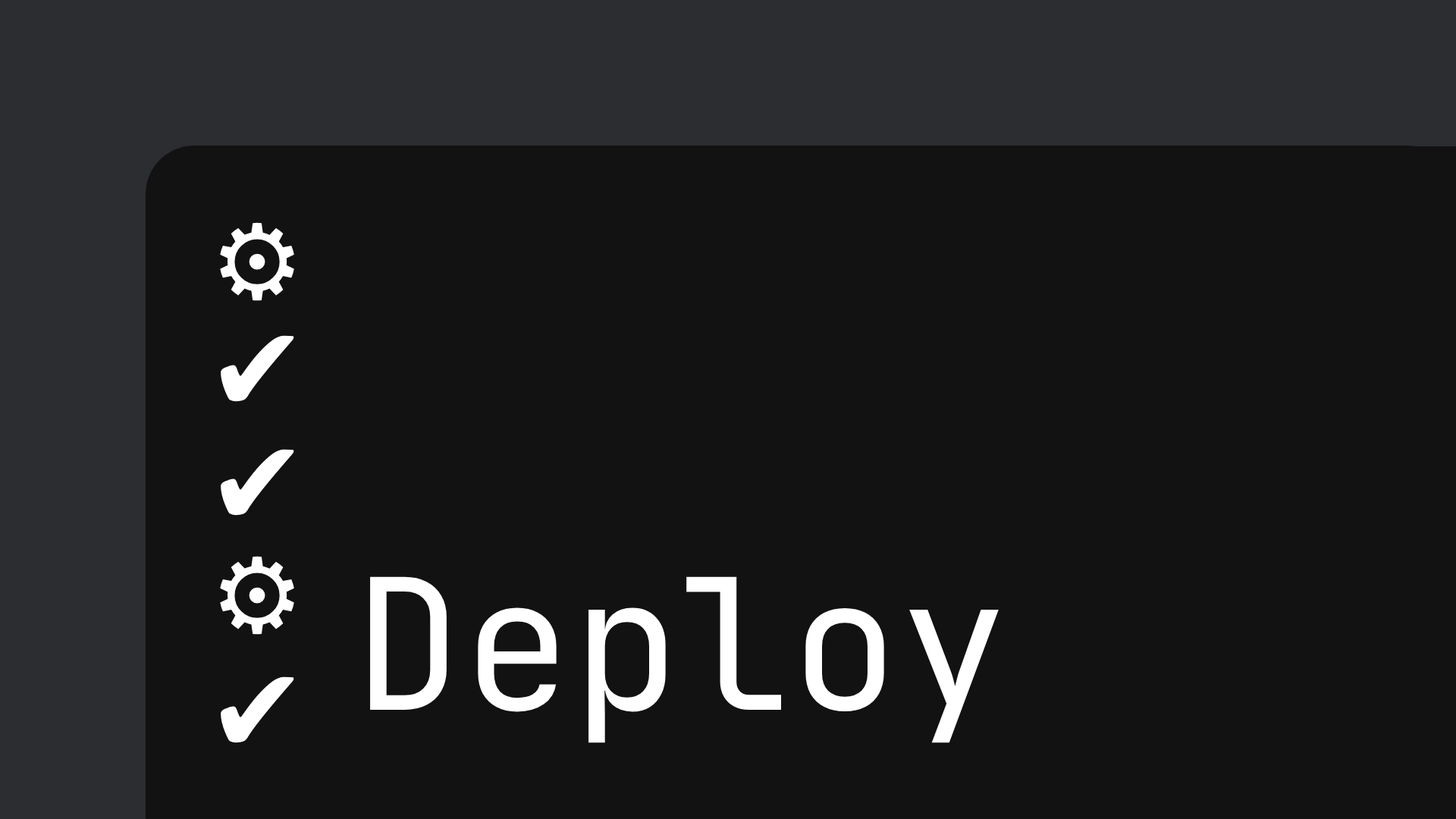
<style>
.page{position:relative;width:1456px;height:819px;background:#121212}
.page>*{position:absolute;margin:0}
.t1{font:104.5px "DejaVuSans";color:#ffffff}
.t2{font:120.5px "DejaVuSans";color:#ffffff}
.t3{font:182px "JetBrainsMono-Regular";color:#ffffff}
</style>
<div class="page">
<p class="t1" style="left:220px;top:222px;width:74px;height:79px">⚙</p>
<p class="t2" style="left:221px;top:335px;width:73px;height:67px">✔</p>
<p class="t2" style="left:221px;top:449px;width:73px;height:67px">✔</p>
<p class="t1" style="left:220px;top:556px;width:74px;height:79px">⚙</p>
<p class="t3" style="left:370px;top:576px;width:629px;height:167px">Deploy</p>
<p class="t2" style="left:221px;top:676px;width:73px;height:67px">✔</p>
</div>
